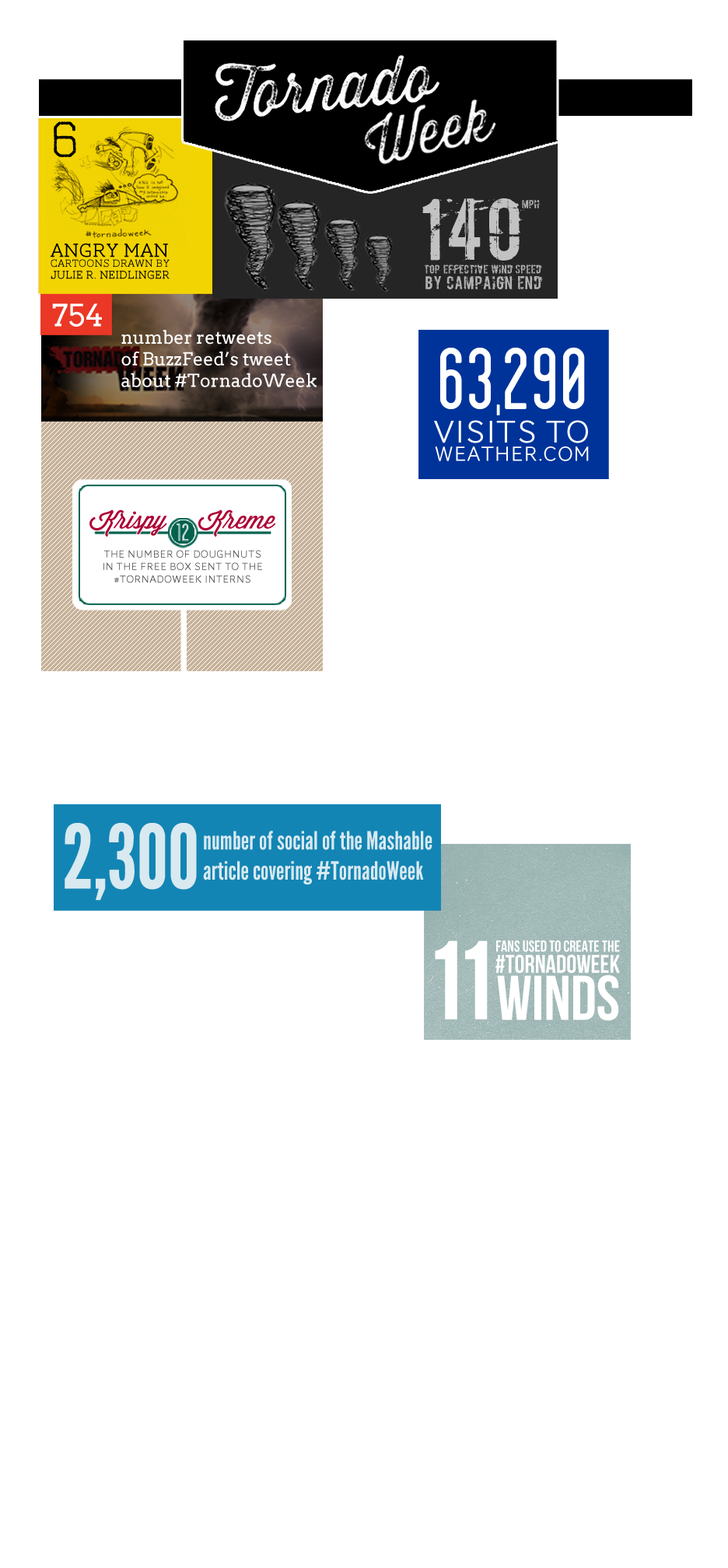
<style>
.page{position:relative;width:728px;height:1568px;background:#ffffff}
.page>*{position:absolute;margin:0}
.t1{font:51.8px "OctinVintageFree";color:#000000}
.t2{font:73.5px "Boycott";color:#c2c2c2}
.t3{font:9.8px "Boycott";color:#b2b2b2}
.t4{font:19.6px "AWConquerorSlab-Light";color:#000000}
.t5{font:10.6px "AWConquerorSlab-Light";color:#000000}
.t6{font:10.1px "Boycott";color:#b2b2b2}
.t7{font:11.4px "AWConquerorSlab-Light";color:#000000}
.t8{font:15.5px "Boycott";color:#b2b2b2}
.t9{font:30.5px "Arvo";color:#ffffff}
.t10{font:17.9px "Arvo";color:#ffffff}
.t11{font:92.4px "Blanch-Condensed";color:#ffffff}
.t12{font:46.7px "Blanch-Condensed";color:#ffffff}
.t13{font:32.2px "AWConquerorSans-Light";color:#ffffff}
.t14{font:20.9px "AWConquerorSans-Light";color:#ffffff}
.t15{font:25.2px "WisdomScriptAI";color:#ad0134}
.t16{font:25.8px "Blanch-CondensedInline";color:#ffffff}
.t17{font:10.4px "AWConquerorSans-Light";color:#464646}
.t18{font:88.2px "LeagueGothic";color:#d8e9f0}
.t19{font:25.1px "LeagueGothic";color:#d8e9f0}
.t20{font:87.8px "Bebas";color:#ffffff}
.t21{font:15.7px "BebasNeue";color:#ffffff}
.t22{font:25.4px "BebasNeue";color:#ffffff}
.t23{font:63px "BebasNeue";color:#ffffff}
</style>
<div class="page">
<p class="t1" style="left:54px;top:121px;width:22px;height:37px">6</p>
<p class="t2" style="left:422px;top:198px;width:106px;height:73px">140</p>
<p class="t3" style="left:522px;top:198px;width:19px;height:10px">mph</p>
<p class="t4" style="left:51px;top:243px;width:117px;height:14px">Angry Man</p>
<p class="t5" style="left:51px;top:259px;width:119px;height:9px">cartoons DRAWN BY</p>
<p class="t6" style="left:425px;top:262px;width:117px;height:13px">Top “Effective Wind Speed”</p>
<p class="t7" style="left:51px;top:271px;width:119px;height:8px">Julie R. Neidlinger</p>
<p class="t8" style="left:425px;top:272px;width:119px;height:20px">BY CAMPAIGN END</p>
<p class="t9" style="left:52px;top:303px;width:50px;height:24px">754</p>
<p class="t10" style="left:121px;top:330px;width:196px;height:57px">number retweets<br>of BuzzFeed’s tweet<br>about #TornadoWeek</p>
<p class="t11" style="left:440px;top:347px;width:145px;height:68px">63<span class="t12">,</span>290</p>
<p class="t13" style="left:434px;top:420px;width:154px;height:23px">VISITS TO</p>
<p class="t14" style="left:435px;top:446px;width:154px;height:15px">WEATHER.COM</p>
<p class="t15" style="left:89px;top:509px;width:187px;height:28px">Krispy    Kreme</p>
<p class="t16" style="left:177px;top:523px;width:12px;height:18px">12</p>
<p class="t17" style="left:103px;top:550px;width:159px;height:33px;text-align:center">THE NUMBER OF DOUGHNUTS<br>IN THE FREE BOX SENT TO THE<br>#TORNADOWEEK INTERNS</p>
<p class="t18" style="left:65px;top:823px;width:132px;height:78px">2,300</p>
<p class="t19" style="left:203px;top:831px;width:229px;height:54px">number of social of the Mashable <br>article covering #TornadoWeek</p>
<p class="t20" style="left:435px;top:940px;width:53px;height:80px">11</p>
<p class="t21" style="left:496px;top:940px;width:124px;height:12px">fans used to create the</p>
<p class="t22" style="left:495px;top:954px;width:125px;height:19px">#TornadoWeek</p>
<p class="t23" style="left:497px;top:975px;width:122px;height:45px">winds</p>
</div>
